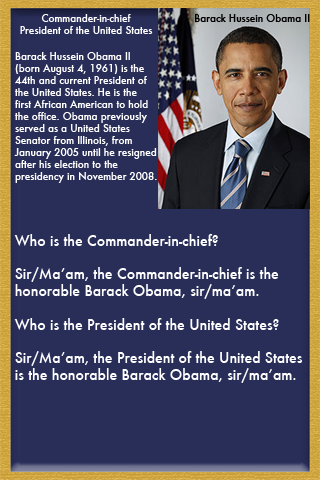
<style>
.page{position:relative;width:320px;height:480px;background:#292e59}
.page>*{position:absolute;margin:0}
.t1{font:10px "Futura-Medium";color:#ffffff}
.t2{font:10px "Futura-Medium";color:#000000}
.t3{font:14px "Futura-Medium";color:#ffffff}
</style>
<div class="page">
<p class="t1" style="left:20px;top:14px;width:133px;height:20px;text-align:center">Commander-in-chief<br>President of the United States</p>
<p class="t2" style="left:195px;top:14px;width:115px;height:8px">Barack Hussein Obama II</p>
<p class="t1" style="left:14px;top:52px;width:143px;height:131px">Barack Hussein Obama II <br>(born August 4, 1961) is the <br>44th and current President of <br>the United States. He is the <br>first African American to hold <br>the office. Obama previously <br>served as a United States <br>Senator from Illinois, from <br>January 2005 until he resigned <br>after his election to the <br>presidency in November 2008.</p>
<p class="t3" style="left:14px;top:234px;width:288px;height:149px">Who is the Commander-in-chief?<br><br>Sir/Ma’am, the Commander-in-chief is the <br>honorable Barack Obama, sir/ma’am.<br><br>Who is the President of the United States?<br><br>Sir/Ma’am, the President of the United States <br>is the honorable Barack Obama, sir/ma’am.</p>
</div>
